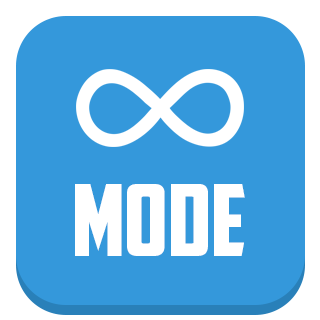
<style>
.page{position:relative;width:320px;height:320px;background:#3498db}
.page>*{position:absolute;margin:0}
.t1{font:100px "AmericanCaptain";color:#ffffff}
</style>
<div class="page">
<p class="t1" style="left:75px;top:184px;width:170px;height:72px">mode</p>
</div>
